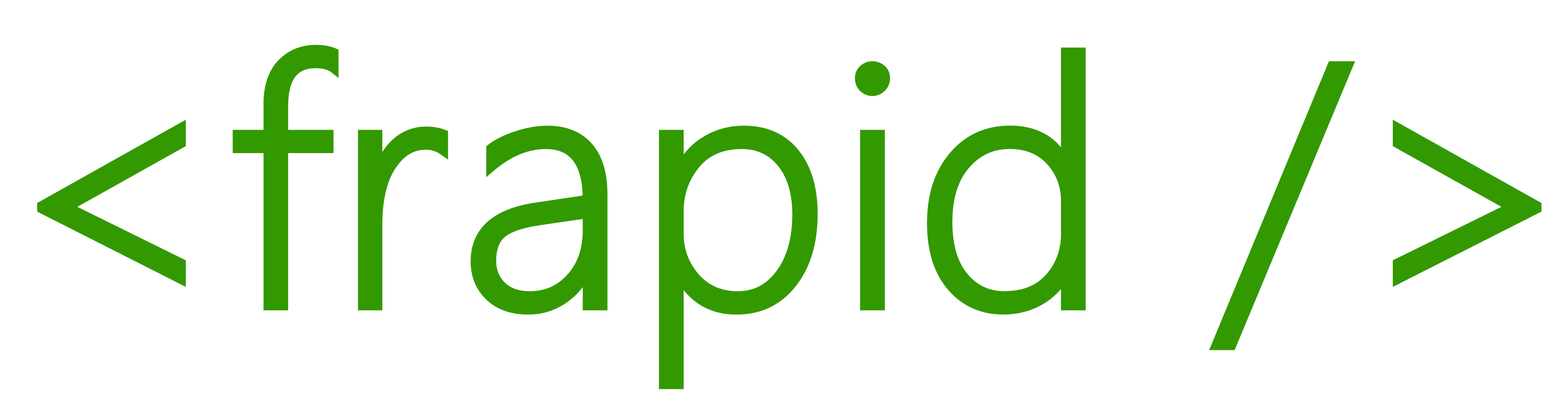
<style>
.page{position:relative;width:1568px;height:405px;background:#ffffff}
.page>*{position:absolute;margin:0}
.t1{font:342.6px "SegoeUI-Light";color:#339900;font-weight:bold}
</style>
<div class="page">
<p class="t1" style="left:37px;top:45px;width:1505px;height:345px">&lt;frapid /&gt;</p>
</div>
